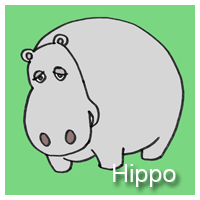
<style>
.page{position:relative;width:200px;height:200px;background:#d6d6d6}
.page>*{position:absolute;margin:0}
.t1{font:25px "ArialMT";color:#ffffff}
</style>
<div class="page">
<p class="t1" style="left:113px;top:164px;width:63px;height:23px">Hippo</p>
</div>
